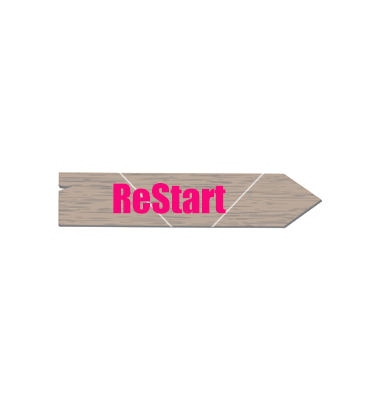
<style>
.page{position:relative;width:380px;height:400px;background:#ffffff}
.page>*{position:absolute;margin:0}
.t1{font:37.5px "Impact";color:#f80778}
</style>
<div class="page">
<p class="t1" style="left:113px;top:183px;width:113px;height:31px">ReStart</p>
</div>
